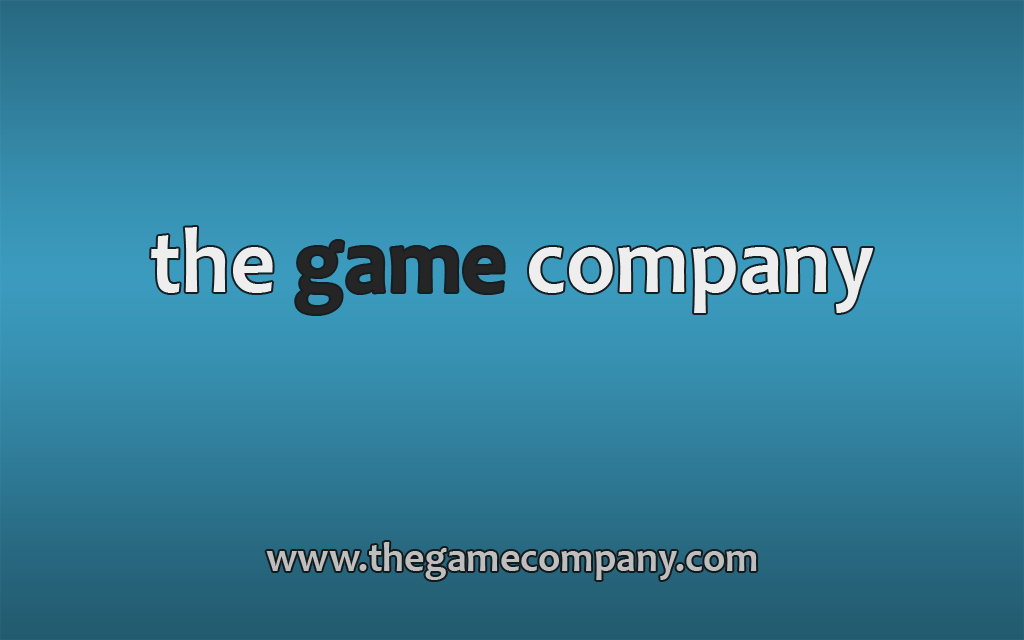
<style>
.page{position:relative;width:1024px;height:640px}
.page>*{position:absolute;margin:0}
.t1{font:94.1px "Candara-Bold";color:#eeeeee;scale:0.94 1}
.t2{font:94.1px "Candara-Bold";color:#252525;scale:0.94 1}
.t3{font:42.4px "Candara-Bold";color:#bebebe;scale:0.94 1}
</style>
<div class="page">
<p class="t1" style="left:151px;top:227px;width:722px;height:87px">the <span class="t2">game</span> company</p>
<p class="t3" style="left:266px;top:542px;width:491px;height:38px">www.thegamecompany.com</p>
</div>
